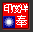
<style>
.page{position:relative;width:33px;height:32px;background:#f20000}
.page>*{position:absolute;margin:0}
.t1{font:10.4px "SimSun";letter-spacing:-0.25em;color:#ffffff}
.t2{font:11.7px "SimSun";color:#ffffff}
</style>
<div class="page">
<p class="t1" style="left:4px;top:4px;width:24px;height:9px">印度洋</p>
<p class="t2" style="left:16px;top:15px;width:11px;height:12px">奉</p>
</div>
